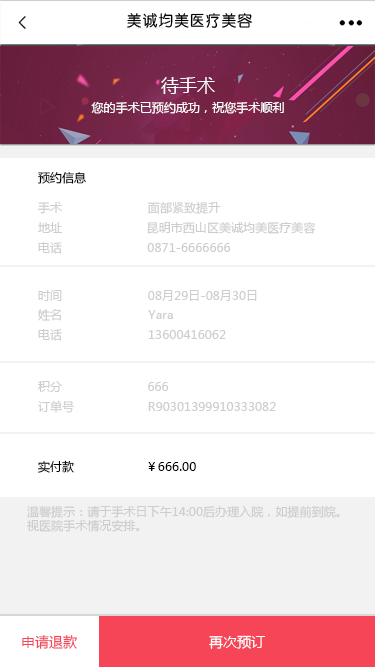
<style>
.page{position:relative;width:375px;height:667px;background:#ffffff}
.page>*{position:absolute;margin:0}
.t1{font:18px "MicrosoftYaHei";letter-spacing:0.005em;color:#ffffff}
.t2{font:12px "MicrosoftYaHei";letter-spacing:0.005em;color:#ffffff}
.t3{font:12px "MicrosoftYaHei";letter-spacing:0.005em;color:#000000}
.t4{font:12px "MicrosoftYaHei";letter-spacing:0.005em;color:#cdcdcd}
.t5{font:12px "MicrosoftYaHei";letter-spacing:0.005em;color:#010101}
.t6{font:12px/14px "MicrosoftYaHei";letter-spacing:0.005em;color:#cdcdcd}
.t7{font:14px "MicrosoftYaHei";letter-spacing:0.005em;color:#f54556}
.t8{font:14px "MicrosoftYaHei";letter-spacing:0.005em;color:#ffffff}
</style>
<div class="page">
<p class="t1" style="left:161px;top:77px;width:54px;height:17px">待手术</p>
<p class="t2" style="left:91px;top:101px;width:193px;height:13px">您的手术已预约成功，祝您手术顺利</p>
<p class="t3" style="left:38px;top:171px;width:48px;height:13px">预约信息</p>
<p class="t4" style="left:38px;top:202px;width:25px;height:12px">手术</p>
<p class="t4" style="left:148px;top:201px;width:73px;height:13px">面部紧致提升</p>
<p class="t4" style="left:38px;top:222px;width:24px;height:11px">地址</p>
<p class="t4" style="left:147px;top:222px;width:169px;height:12px">昆明市西山区美诚均美医疗美容</p>
<p class="t4" style="left:38px;top:242px;width:24px;height:12px">电话</p>
<p class="t4" style="left:147px;top:243px;width:84px;height:9px">0871-6666666</p>
<p class="t4" style="left:38px;top:290px;width:24px;height:11px">时间</p>
<p class="t4" style="left:148px;top:290px;width:109px;height:11px">08月29日-08月30日</p>
<p class="t4" style="left:37px;top:309px;width:24px;height:12px">姓名</p>
<p class="t4" style="left:148px;top:310px;width:25px;height:9px">Yara</p>
<p class="t4" style="left:38px;top:329px;width:24px;height:12px">电话</p>
<p class="t4" style="left:148px;top:330px;width:78px;height:9px">13600416062</p>
<p class="t4" style="left:38px;top:381px;width:25px;height:11px">积分</p>
<p class="t4" style="left:148px;top:382px;width:21px;height:9px">666</p>
<p class="t4" style="left:38px;top:400px;width:37px;height:13px">订单号</p>
<p class="t4" style="left:148px;top:402px;width:128px;height:9px">R90301399910333082</p>
<p class="t5" style="left:38px;top:460px;width:36px;height:13px">实付款</p>
<p class="t3" style="left:148px;top:462px;width:48px;height:9px">￥666.00</p>
<p class="t6" style="left:27px;top:505px;width:313px;height:27px">温馨提示：请于手术日下午14:00后办理入院，如提前到院。<br>视医院手术情况安排。</p>
<p class="t7" style="left:22px;top:635px;width:55px;height:14px">申请退款</p>
<p class="t8" style="left:209px;top:635px;width:56px;height:14px">再次预订</p>
</div>
